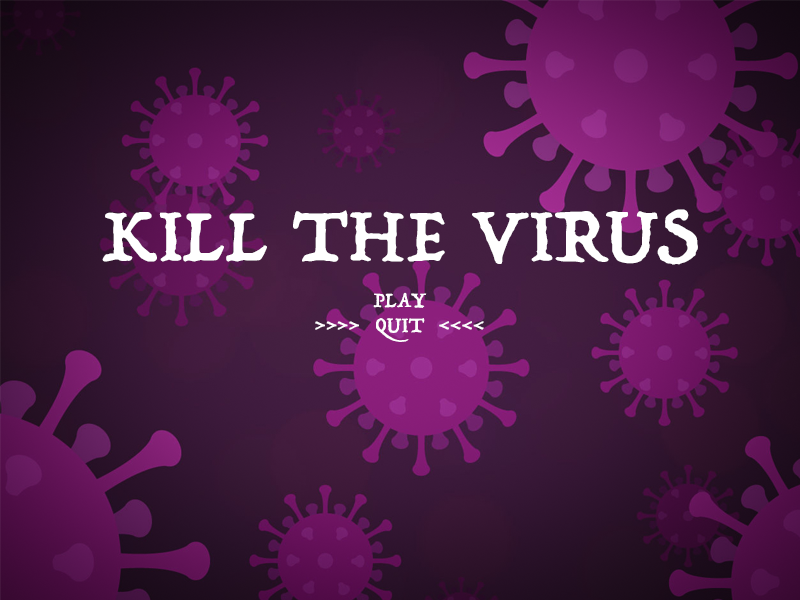
<style>
.page{position:relative;width:800px;height:600px}
.page>*{position:absolute;margin:0}
.t1{font:85px "Trattatello";color:#ffffff}
.t2{font:24px "Trattatello";color:#fefdfe}
</style>
<div class="page">
<p class="t1" style="left:102px;top:209px;width:596px;height:56px">KILL THE VIRUS</p>
<p class="t2" style="left:373px;top:292px;width:54px;height:16px">PLAY</p>
<p class="t2" style="left:376px;top:318px;width:49px;height:24px">QUIT</p>
<p class="t2" style="left:315px;top:321px;width:44px;height:9px">&gt;&gt;&gt;&gt;</p>
<p class="t2" style="left:439px;top:321px;width:45px;height:9px;rotate:180deg">&gt;&gt;&gt;&gt;</p>
</div>
